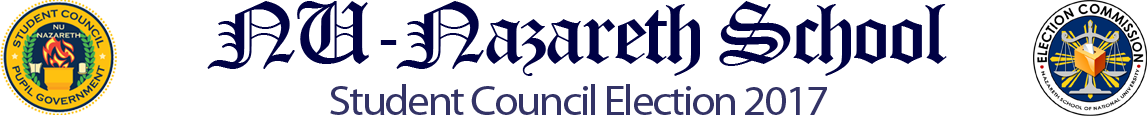
<style>
.page{position:relative;width:1147px;height:116px;background:#ffffff}
.page>*{position:absolute;margin:0}
.t1{font:85px "OldEnglishTextMT";letter-spacing:-0.05em;color:#000144;scale:1.06 1}
.t2{font:42.5px "MyriadPro-Regular";letter-spacing:-0.05em;color:#333366;scale:1.06 1}
</style>
<div class="page">
<p class="t1" style="left:207px;top:1px;width:740px;height:75px">NU-Nazareth School</p>
<p class="t2" style="left:330px;top:84px;width:497px;height:31px">Student Council Election 2017</p>
</div>
